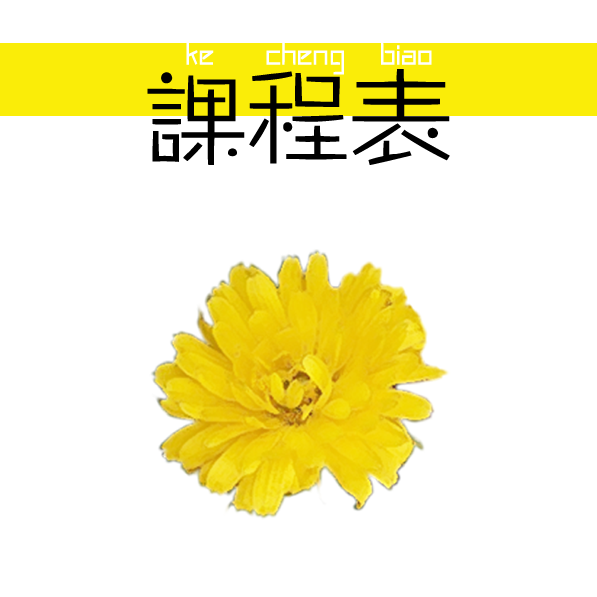
<style>
.page{position:relative;width:597px;height:597px;background:#ffffff}
.page>*{position:absolute;margin:0}
.t1{font:43.1px "FZZHYFW--GB1-0";color:#ffffff;scale:0.94 1}
.t2{font:103.1px "FZZHYFW--GB1-0";color:#000000}
</style>
<div class="page">
<p class="t1" style="left:186px;top:38px;width:246px;height:37px">ke   cheng  biao</p>
<p class="t2" style="left:147px;top:69px;width:303px;height:96px">课程表</p>
</div>
